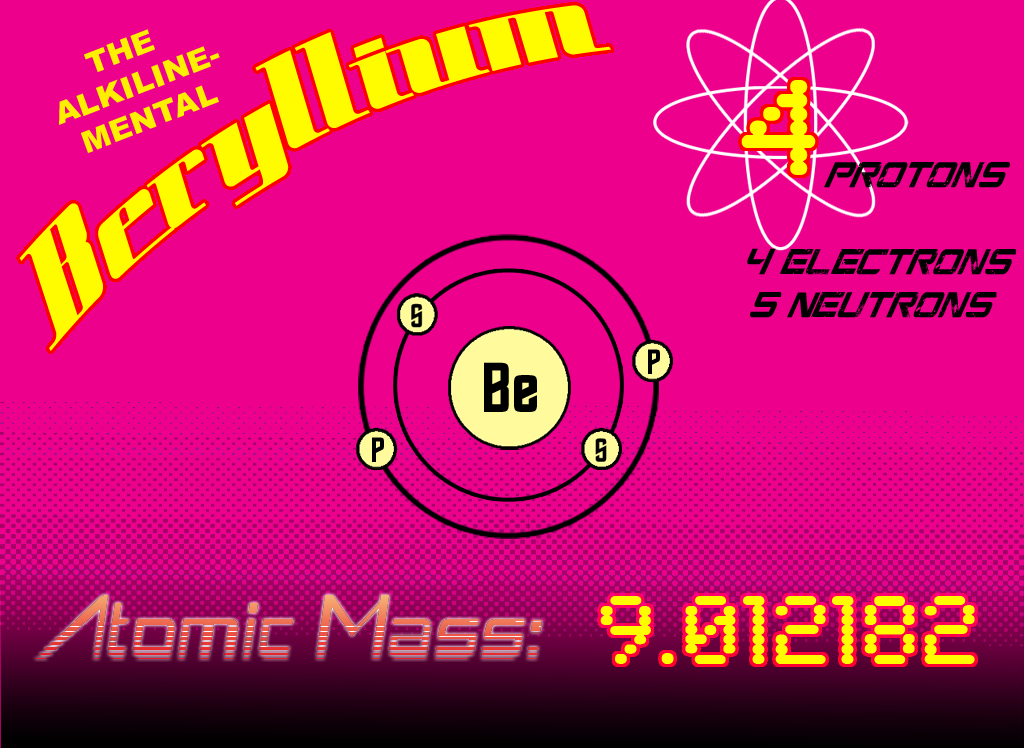
<style>
.page{position:relative;width:1024px;height:748px;background:#ed008c}
.page>*{position:absolute;margin:0}
.t1{font:120px "SpaceCadetNF";color:#fffc00;scale:1.03 1}
.t2{font:30px "Arial-Black";color:#feef00;scale:1.04 1}
.t3{font:140px "SynchroLET";color:#fffc00}
.t4{font:39.4px "CGFLocustResistance";color:#000000;scale:0.67 1}
.t5{font:63.1px "Roddenberry";color:#000000;scale:1.07 1}
.t6{font:100px "SynchroLET";color:#fffc00}
</style>
<div class="page">
<p class="t1" style="left:19px;top:5px;width:592px;height:346px;rotate:-28deg">Beryllium</p>
<p class="t2" style="left:59px;top:29px;width:161px;height:125px;text-align:center;rotate:-21deg">THE <br>ALKILINE-<br>MENTAL</p>
<p class="t3" style="left:741px;top:80px;width:75px;height:95px">4</p>
<p class="t4" style="left:747px;top:162px;width:270px;height:156px;text-align:center">ProtonS<br><br>4  electrons<br>    5  Neutrons</p>
<p class="t5" style="left:484px;top:362px;width:53px;height:50px">Be</p>
<p class="t6" style="left:600px;top:596px;width:375px;height:68px">9.012182</p>
</div>
